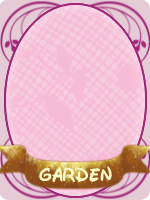
<style>
.page{position:relative;width:150px;height:200px}
.page>*{position:absolute;margin:0}
.t1{font:37.4px "Waltograph";color:#fcfac7}
</style>
<div class="page">
<p class="t1" style="left:39px;top:166px;width:73px;height:16px">garden</p>
</div>
